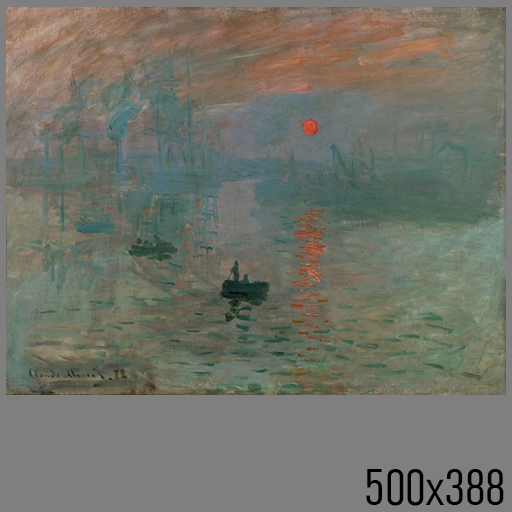
<style>
.page{position:relative;width:512px;height:512px;background:#7f7f7f}
.page>*{position:absolute;margin:0}
.t1{font:50px "Bahnschrift-LightCondensed";color:#000000}
</style>
<div class="page">
<p class="t1" style="left:366px;top:469px;width:138px;height:37px">500x388</p>
</div>
